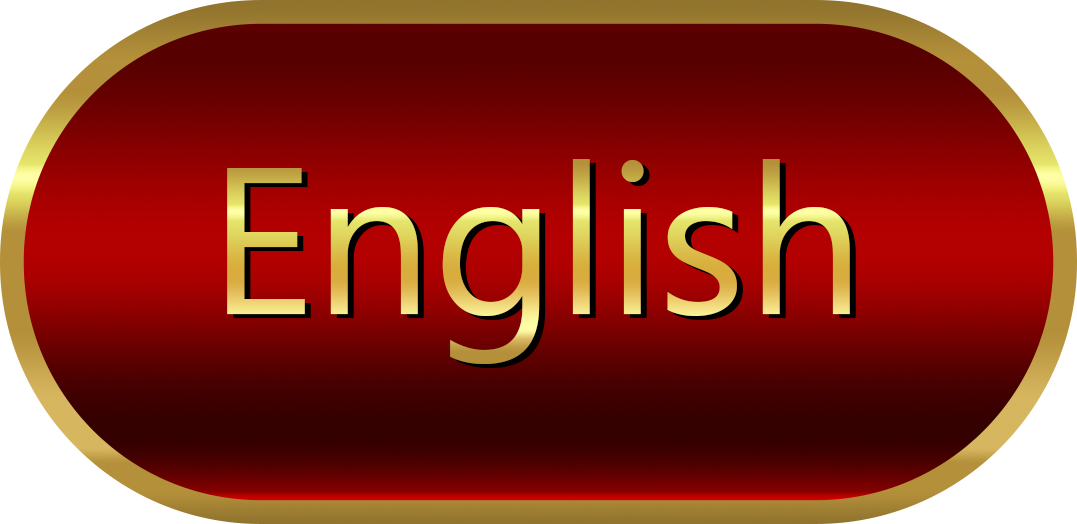
<style>
.page{position:relative;width:1077px;height:524px}
.page>*{position:absolute;margin:0}
.t1{font:209.4px "MyanmarText"}
</style>
<div class="page">
<p class="t1" style="left:227px;top:159px;width:623px;height:205px">English</p>
</div>
